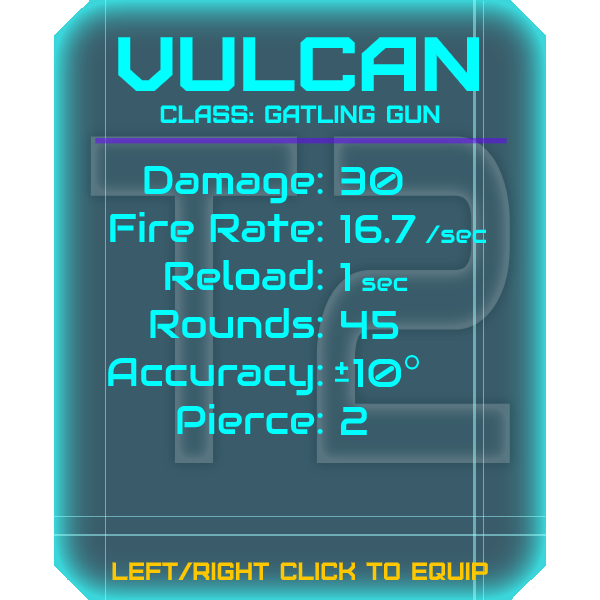
<style>
.page{position:relative;width:600px;height:600px;background:#3a5c6a}
.page>*{position:absolute;margin:0}
.t1{font:76.8px "Furore";color:#00ffff;scale:1.13 1}
.t2{font:25px "Furore";color:#00ffff}
.t3{font:40px "Audiowide-Regular";color:#00ffff}
.t4{font:25px "Audiowide-Regular";color:#00ffff}
.t5{font:25px "Furore";color:#ffc700}
</style>
<div class="page">
<p class="t1" style="left:118px;top:37px;width:361px;height:54px">vulcan</p>
<p class="t2" style="left:160px;top:105px;width:280px;height:18px">Class: gatling gun</p>
<p class="t3" style="left:108px;top:165px;width:215px;height:269px;text-align:right">Damage:<br>Fire Rate:<br>Reload:<br>Rounds:<br>Accuracy:<br>Pierce:</p>
<p class="t3" style="left:340px;top:166px;width:146px;height:269px">30<br>16.7 <span class="t4">/sec<br></span>1 <span class="t4">sec<br></span>45<br> 10<br>2</p>
<p class="t5" style="left:112px;top:562px;width:376px;height:18px">left/right click to equip</p>
</div>
